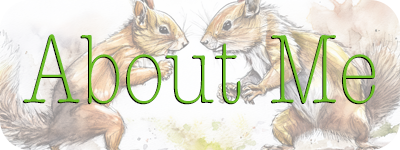
<style>
.page{position:relative;width:400px;height:150px}
.page>*{position:absolute;margin:0}
.t1{font:100px "AmericanTypewriter-CondensedLight"}
.t2{font:100px "AmericanTypewriter-CondensedLight";color:#6abc24}
</style>
<div class="page">
<p class="t1" style="left:23px;top:35px;width:351px;height:70px">About Me</p>
<p class="t2" style="left:24px;top:34px;width:351px;height:70px">About Me</p>
</div>
